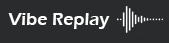
<style>
.page{position:relative;width:169px;height:43px;background:#292b2d}
.page>*{position:absolute;margin:0}
.t1{font:18px "ErasITC-Demi";color:#fefefe}
</style>
<div class="page">
<p class="t1" style="left:8px;top:13px;width:102px;height:16px">Vibe Replay</p>
</div>
